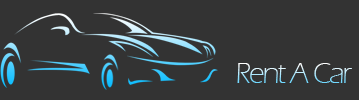
<style>
.page{position:relative;width:359px;height:100px;background:#333333}
.page>*{position:absolute;margin:0}
.t1{font:30px "ErasITC-Light";letter-spacing:-0.06em}
</style>
<div class="page">
<p class="t1" style="left:237px;top:63px;width:115px;height:20px">Rent A Car</p>
</div>
